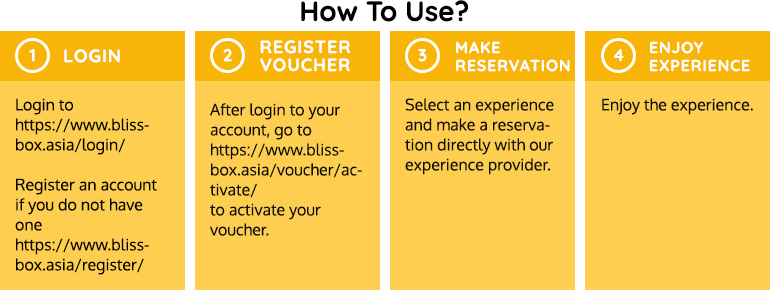
<style>
.page{position:relative;width:770px;height:290px;background:#fece51}
.page>*{position:absolute;margin:0}
.t1{font:28px "Quicksand-Bold";color:#000000}
.t2{font:18px/18px "Quicksand-Bold";letter-spacing:0.05em;color:#ffffff}
.t3{font:16px/18px "Quicksand-Bold";letter-spacing:0.05em;color:#ffffff}
.t4{font:17.2px "Quicksand-Bold";color:#ffffff}
.t5{font:18px "Quicksand-Bold";letter-spacing:0.05em;color:#ffffff}
.t6{font:16px/20px "Oxygen-Regular";color:#000000}
.t7{font:16px/20px "Oxygen-Regular";color:#0d0d0d}
.t8{font:16px "Oxygen-Regular";color:#0d0d0d}
</style>
<div class="page">
<p class="t1" style="left:301px;top:0px;width:168px;height:22px">How To Use?</p>
<p class="t2" style="left:260px;top:40px;width:90px;height:32px;text-align:center">REGISTER<br>VOUCHER</p>
<p class="t3" style="left:456px;top:41px;width:114px;height:31px">MAKE<br>RESERVATION</p>
<p class="t3" style="left:650px;top:41px;width:100px;height:31px">ENJOY <br>EXPERIENCE</p>
<p class="t4" style="left:29px;top:49px;width:6px;height:13px">1</p>
<p class="t5" style="left:64px;top:49px;width:56px;height:14px">LOGIN</p>
<p class="t4" style="left:223px;top:48px;width:9px;height:14px">2</p>
<p class="t4" style="left:418px;top:49px;width:9px;height:13px">3</p>
<p class="t4" style="left:613px;top:49px;width:11px;height:13px">4</p>
<p class="t6" style="left:15px;top:98px;width:142px;height:177px">Login to <br>https://www.blissbox.asia/login/<br><br>Register an account<br>if you do not have one<br>https://www.blissbox.asia/register/</p>
<p class="t7" style="left:405px;top:98px;width:149px;height:77px">Select an experience and make a reservation directly with our experience provider.</p>
<p class="t8" style="left:602px;top:98px;width:151px;height:17px">Enjoy the experience.</p>
<p class="t7" style="left:209px;top:103px;width:153px;height:133px">After login to your account, go to<br>https://www.blissbox.asia/voucher/activate/<br>to activate your voucher.</p>
</div>
